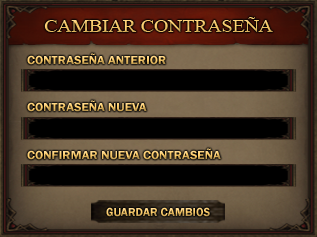
<style>
.page{position:relative;width:317px;height:237px}
.page>*{position:absolute;margin:0}
.t1{font:18px "TimesNewRomanPSMT";scale:1.09 1}
.t2{font:12px "FranklinGothic-Demi";scale:1.07 1}
.t3{font:12px "FranklinGothic-Demi"}
</style>
<div class="page">
<p class="t1" style="left:44px;top:17px;width:229px;height:15px">CAMBIAR CONTRASEÑA</p>
<p class="t2" style="left:27px;top:53px;width:139px;height:12px">CONTRASEÑA ANTERIOR</p>
<p class="t2" style="left:27px;top:100px;width:120px;height:12px">CONTRASEÑA NUEVA</p>
<p class="t2" style="left:27px;top:148px;width:194px;height:12px">CONFIRMAR NUEVA CONTRASEÑA</p>
<p class="t3" style="left:106px;top:207px;width:104px;height:10px">GUARDAR CAMBIOS</p>
</div>
